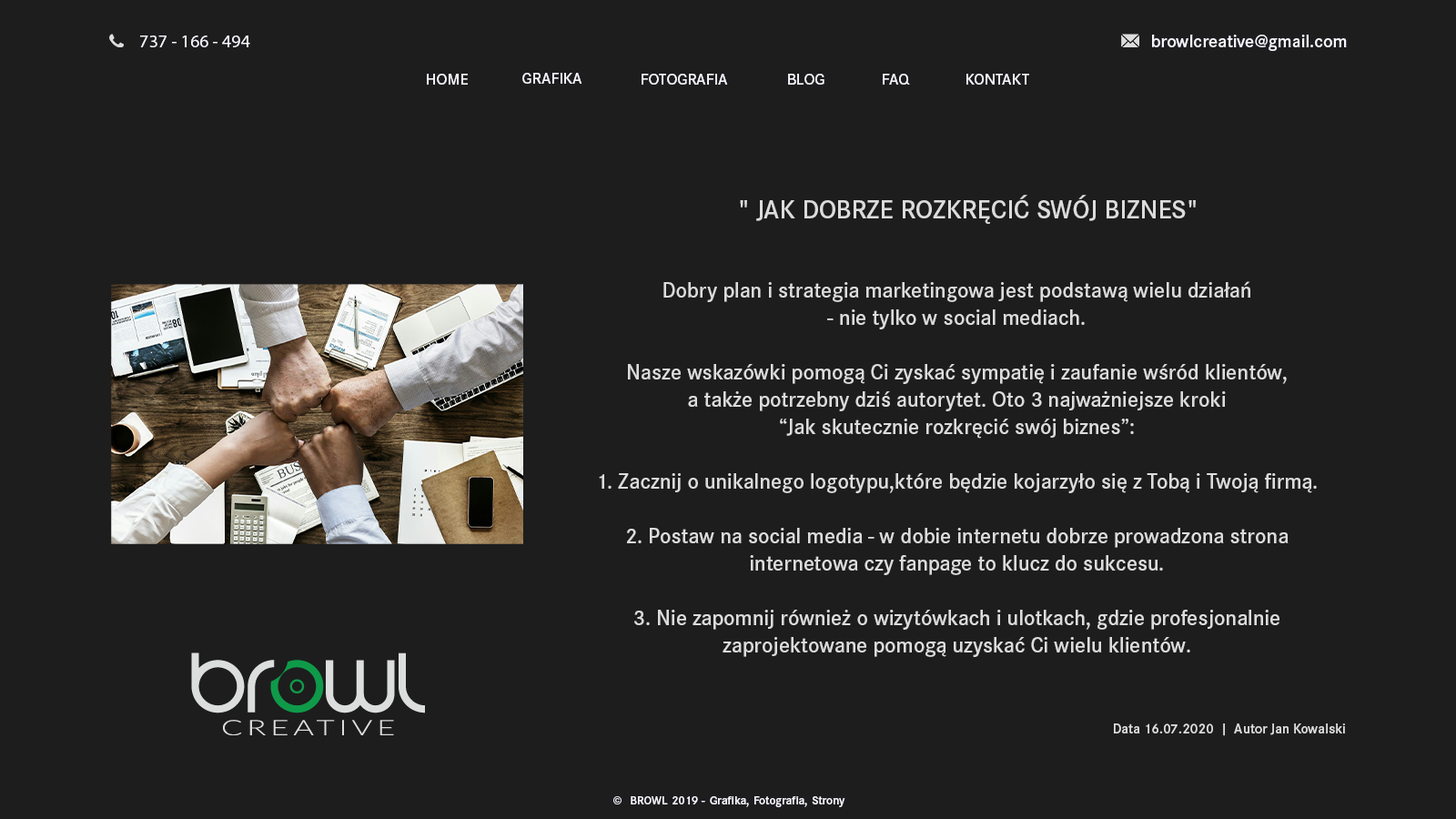
<style>
.page{position:relative;width:1456px;height:819px;background:#1d1d1e}
.page>*{position:absolute;margin:0}
.t1{font:18.2px "MyriadPro-Regular";color:#f7f7ff}
.t2{font:18.2px "CorporateSPro-Demi";color:#f7f7ff}
.t3{font:16.2px "CorporateSPro-Demi";color:#f7f7ff}
.t4{font:26.5px "CorporateSPro-Demi";color:#dcdcdc;text-transform:uppercase}
.t5{font:21.8px/27.3px "CorporateSPro-Demi";color:#dcdcdc}
.t6{font:14.1px "CorporateSPro-Demi";color:#dcdcdc}
.t7{font:12px "CorporateSPro-Demi";color:#f7f7ff}
</style>
<div class="page">
<p class="t1" style="left:140px;top:35px;width:110px;height:12px">737 - 166 - 494</p>
<p class="t2" style="left:1152px;top:35px;width:195px;height:16px">browlcreative@gmail.com</p>
<p class="t3" style="left:427px;top:74px;width:41px;height:11px;text-align:justify">HOME<br>v</p>
<p class="t3" style="left:522px;top:73px;width:60px;height:11px">GRAFIKA</p>
<p class="t3" style="left:642px;top:74px;width:86px;height:11px">FOTOGRAFIA</p>
<p class="t3" style="left:788px;top:74px;width:36px;height:11px">BLOG</p>
<p class="t3" style="left:883px;top:74px;width:27px;height:11px">FAQ</p>
<p class="t3" style="left:966px;top:74px;width:63px;height:11px">KONTAKT</p>
<p class="t4" style="left:740px;top:195px;width:456px;height:29px">" JAK DOBRZE ROZKRĘCIĆ SWÓJ BIZNES"</p>
<p class="t5" style="left:599px;top:281px;width:718px;height:376px;text-align:center">Dobry plan i strategia marketingowa jest podstawą wielu działań <br>- nie tylko w social mediach.<br><br>Nasze wskazówki pomogą Ci zyskać sympatię i zaufanie wśród klientów, <br>a także potrzebny dziś autorytet. Oto 3 najważniejsze kroki  <br>“Jak skutecznie rozkręcić swój biznes”:<br><br>1. Zacznij o unikalnego logotypu,które będzie kojarzyło się z Tobą i Twoją firmą.<br><br>2. Postaw na social media - w dobie internetu dobrze prowadzona strona <br>internetowa czy fanpage to klucz do sukcesu.<br><br>3. Nie zapomnij również o wizytówkach i ulotkach, gdzie profesjonalnie <br>zaprojektowane pomogą uzyskać Ci wielu klientów.</p>
<p class="t6" style="left:1114px;top:723px;width:231px;height:13px">Data 16.07.2020  |  Autor Jan Kowalski</p>
<p class="t7" style="left:613px;top:796px;width:232px;height:11px;text-align:justify">©  BROWL 2019 - Grafika, Fotografia, Strony www<br>v</p>
</div>
